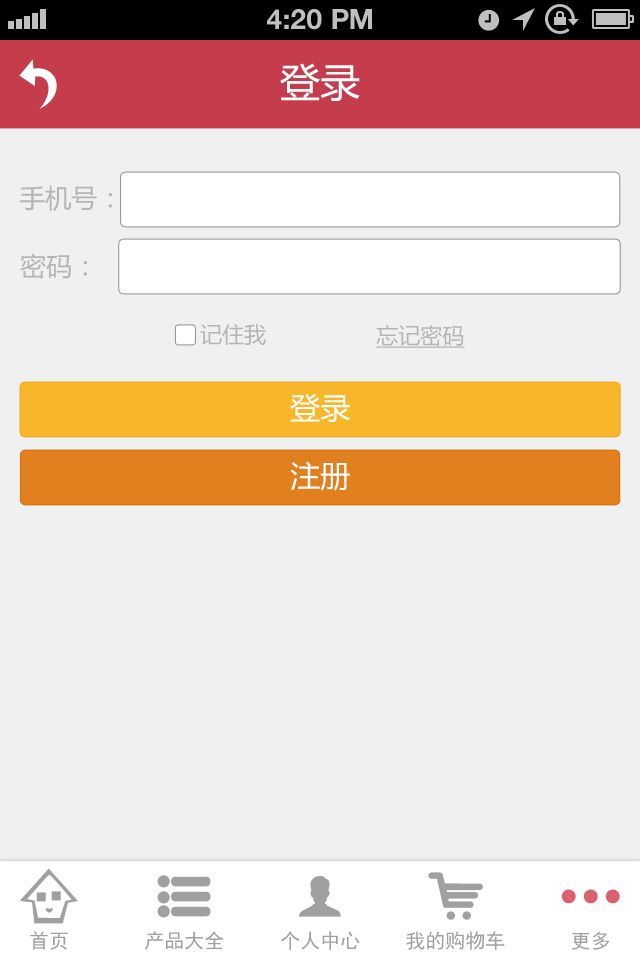
<style>
.page{position:relative;width:640px;height:960px;background:#f0f0f0}
.page>*{position:absolute;margin:0}
.t1{font:28px "HelveticaNeue-Bold";color:#bfbfbf;text-transform:uppercase}
.t2{font:40px "MicrosoftYaHei";color:#ffffff;text-transform:uppercase}
.t3{font:26px "MicrosoftYaHei";color:#b4b4b4;text-transform:uppercase}
.t4{font:22px "MicrosoftYaHei";color:#b4b4b4;text-transform:uppercase}
.t5{font:22px "MicrosoftYaHei";color:#b4b4b4;text-transform:uppercase;text-decoration:underline}
.t6{font:30px "MicrosoftYaHei";color:#ffffff;text-transform:uppercase}
.t7{font:20px "SimHei";color:#a0a0a0}
</style>
<div class="page">
<p class="t1" style="left:267px;top:9px;width:105px;height:21px">4:20 PM</p>
<p class="t2" style="left:280px;top:63px;width:80px;height:38px">登录</p>
<p class="t3" style="left:19px;top:185px;width:93px;height:26px">手机号：</p>
<p class="t3" style="left:20px;top:253px;width:67px;height:26px">密码：</p>
<p class="t4" style="left:200px;top:324px;width:66px;height:21px">记住我</p>
<p class="t5" style="left:376px;top:324px;width:89px;height:24px">忘记密码</p>
<p class="t6" style="left:290px;top:393px;width:60px;height:29px">登录</p>
<p class="t6" style="left:290px;top:461px;width:60px;height:30px">注册</p>
<p class="t7" style="left:30px;top:931px;width:38px;height:19px">首页</p>
<p class="t7" style="left:145px;top:931px;width:79px;height:19px">产品大全</p>
<p class="t7" style="left:281px;top:931px;width:79px;height:19px">个人中心</p>
<p class="t7" style="left:406px;top:931px;width:99px;height:19px">我的购物车</p>
<p class="t7" style="left:572px;top:931px;width:38px;height:19px">更多</p>
</div>
